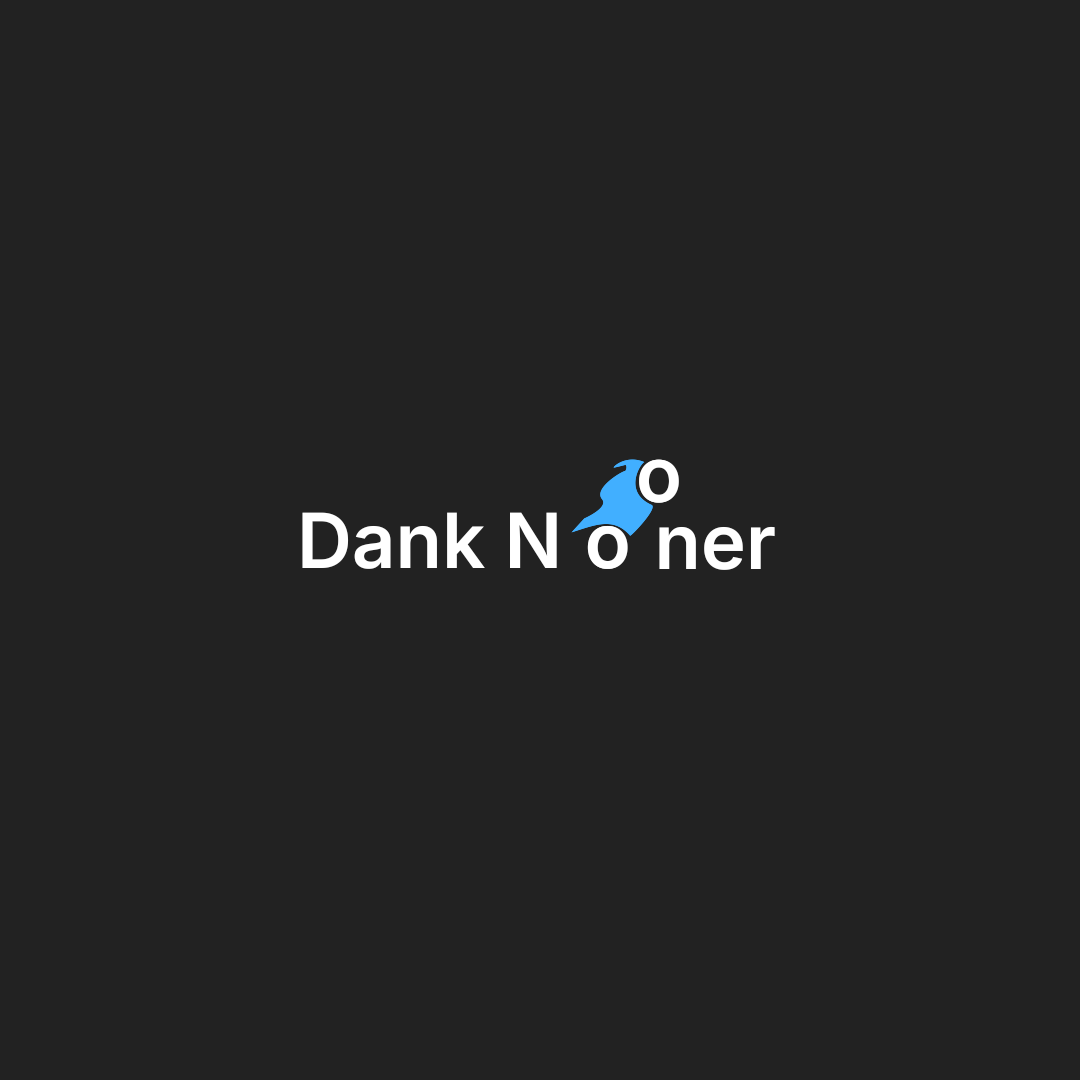
<style>
.page{position:relative;width:1080px;height:1080px;background:#222222}
.page>*{position:absolute;margin:0}
.t1{font:76px "MuseoModerno-SemiBold";color:#ffffff}
.t2{font:76px "MuseoModernoRoman-SemiBold";color:#ffffff}
</style>
<div class="page">
<p class="t1" style="left:638px;top:459px;width:42px;height:45px">o</p>
<p class="t2" style="left:638px;top:459px;width:41px;height:45px">o</p>
<p class="t1" style="left:301px;top:512px;width:257px;height:58px">Dank N</p>
<p class="t1" style="left:586px;top:525px;width:43px;height:45px">o</p>
<p class="t2" style="left:587px;top:525px;width:41px;height:45px">o</p>
<p class="t1" style="left:658px;top:526px;width:118px;height:45px">ner</p>
</div>
